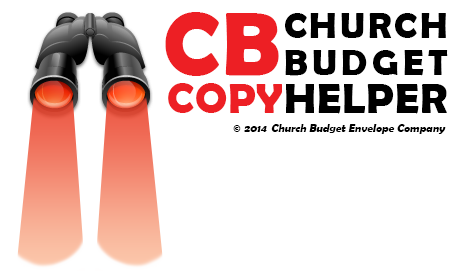
<style>
.page{position:relative;width:453px;height:277px;background:#ffffff}
.page>*{position:absolute;margin:0}
.t1{font:90.7px "BerlinSansFBDemi-Bold";letter-spacing:0.025em;color:#ed1f24}
.t2{font:37.3px/37.3px "BerlinSansFBDemi-Bold";letter-spacing:0.025em;color:#000000}
.t3{font:42.7px "BerlinSansFBDemi-Bold";letter-spacing:0.025em;color:#000000}
.t4{font:42.7px "BerlinSansFBDemi-Bold";letter-spacing:0.025em;color:#ed1f24}
.t5{font:10.7px "BerlinSansFBDemi-Bold";letter-spacing:0.025em;color:#000000}
.t6{font:10.7px "BerlinSansFBDemi-Bold";letter-spacing:0.025em;color:#000000;font-style:italic}
</style>
<div class="page">
<p class="t1" style="left:165px;top:12px;width:114px;height:64px">CB</p>
<p class="t2" style="left:285px;top:13px;width:163px;height:63px;text-align:justify">CHURCH<br>BUDGET</p>
<p class="t3" style="left:168px;top:83px;width:279px;height:31px"><span class="t4">COPY</span>HELPER</p>
<p class="t5" style="left:233px;top:125px;width:8px;height:7px">©</p>
<p class="t6" style="left:244px;top:126px;width:23px;height:6px">2014</p>
<p class="t6" style="left:271px;top:124px;width:175px;height:10px">Church Budget Envelope Company</p>
</div>
